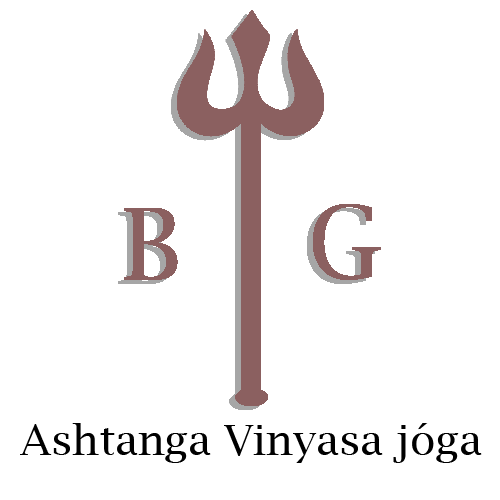
<style>
.page{position:relative;width:500px;height:500px;background:#ffffff}
.page>*{position:absolute;margin:0}
.t1{font:42px "LucidaBright";color:#000000}
</style>
<div class="page">
<p class="t1" style="left:20px;top:423px;width:462px;height:40px">Ashtanga Vinyasa jóga</p>
</div>
